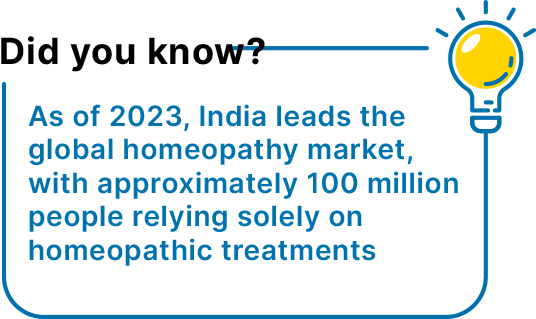
<style>
.page{position:relative;width:536px;height:319px;background:#ffffff}
.page>*{position:absolute;margin:0}
.t1{font:36px "Inter-Bold";letter-spacing:0.025em;color:#000000}
.t2{font:28px "Inter-SemiBold";letter-spacing:0.025em;color:#0072ae}
</style>
<div class="page">
<p class="t1" style="left:1px;top:36px;width:264px;height:36px">Did you know?</p>
<p class="t2" style="left:28px;top:104px;width:430px;height:162px">As of 2023, India leads the<br>global homeopathy market,<br>with approximately 100 million <br>people relying solely on<br>homeopathic treatments</p>
</div>
